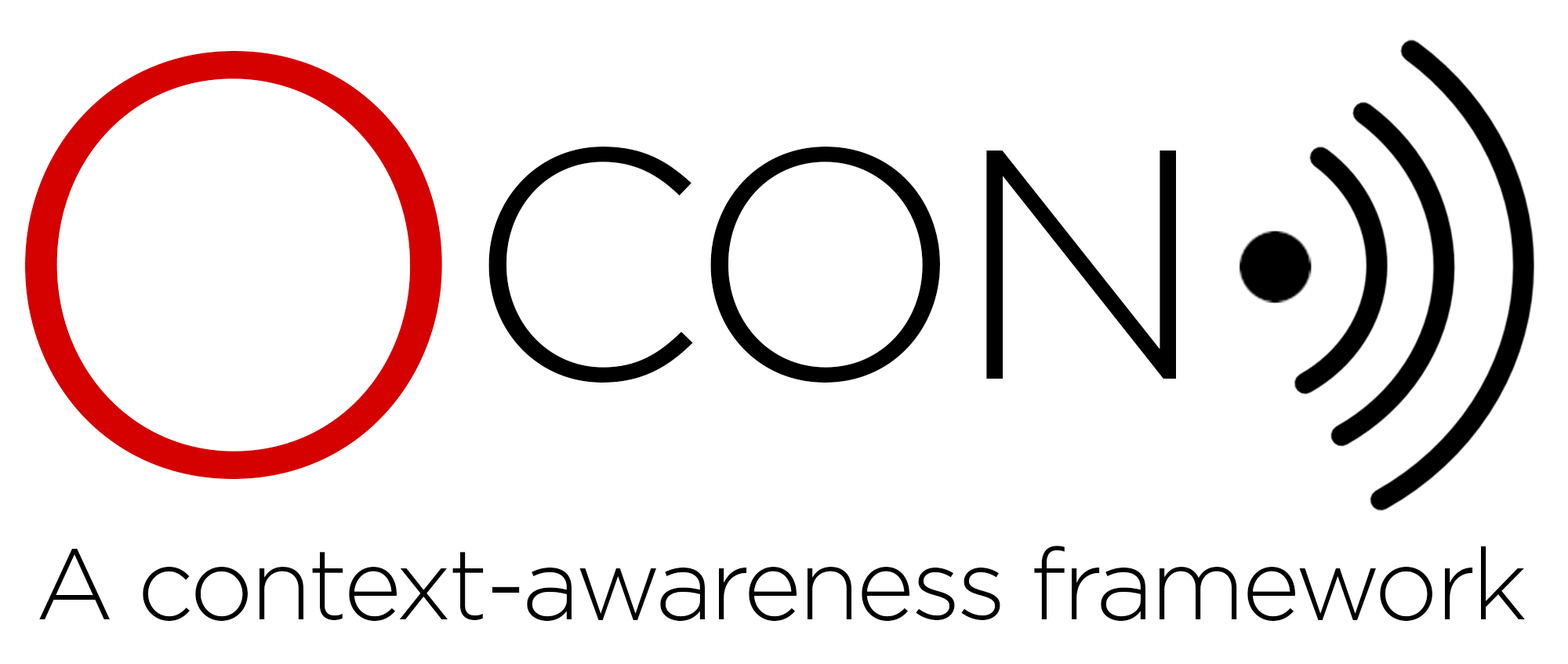
<style>
.page{position:relative;width:1568px;height:664px;background:#ffffff}
.page>*{position:absolute;margin:0}
.t1{font:591.7px "Gotham-Light";letter-spacing:-0.035em;color:#d50000}
.t2{font:325.7px "Gotham-Light";letter-spacing:-0.035em;color:#000000}
.t3{font:100.1px "Gotham-Light";letter-spacing:-0.035em;color:#000000}
</style>
<div class="page">
<p class="t1" style="left:25px;top:51px;width:417px;height:428px">O</p>
<p class="t2" style="left:488px;top:147px;width:688px;height:236px">CON</p>
<p class="t3" style="left:39px;top:546px;width:1486px;height:76px">A context-awareness framework</p>
</div>
